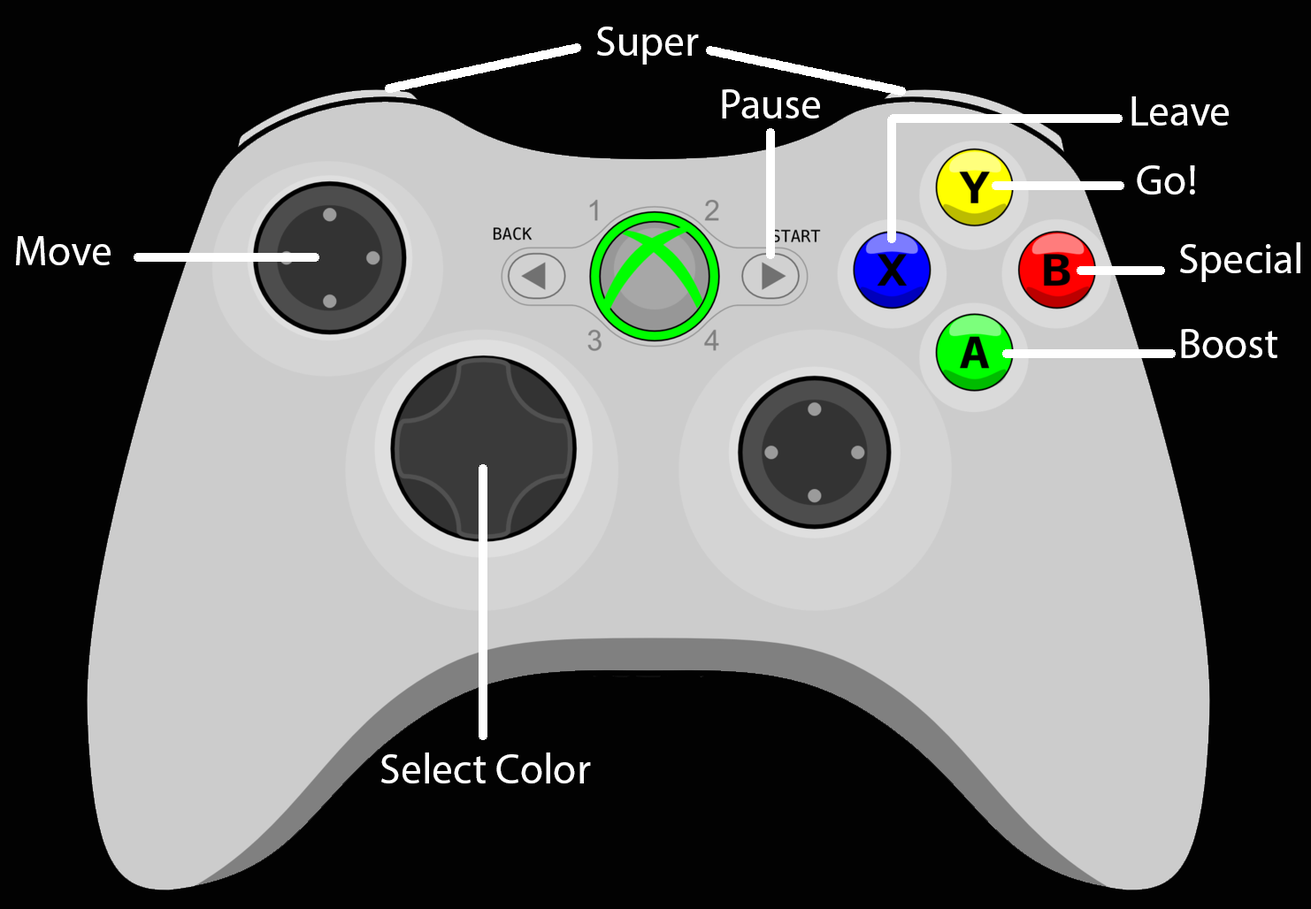
<style>
.page{position:relative;width:1311px;height:909px;background:#020202}
.page>*{position:absolute;margin:0}
.t1{font:42.5px "MyriadPro-Regular";color:#ffffff}
</style>
<div class="page">
<p class="t1" style="left:597px;top:27px;width:102px;height:38px">Super</p>
<p class="t1" style="left:722px;top:89px;width:98px;height:30px">Pause</p>
<p class="t1" style="left:1132px;top:96px;width:97px;height:30px">Leave</p>
<p class="t1" style="left:1137px;top:165px;width:58px;height:30px">Go!</p>
<p class="t1" style="left:16px;top:236px;width:95px;height:29px">Move</p>
<p class="t1" style="left:1180px;top:242px;width:121px;height:40px">Special</p>
<p class="t1" style="left:1181px;top:329px;width:97px;height:29px">Boost</p>
<p class="t1" style="left:381px;top:753px;width:210px;height:31px">Select Color</p>
</div>
